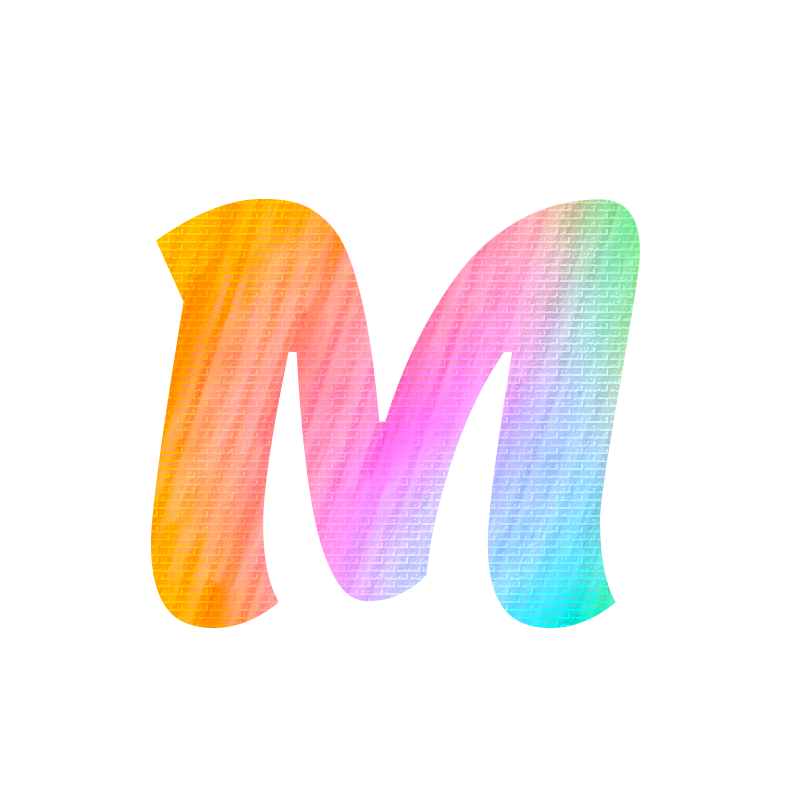
<style>
.page{position:relative;width:800px;height:800px;background:#ffffff}
.page>*{position:absolute;margin:0}
.t1{font:570.2px "Lemon-Regular";letter-spacing:0.01em;scale:0.91 1}
</style>
<div class="page">
<p class="t1" style="left:151px;top:199px;width:489px;height:429px">M</p>
</div>
